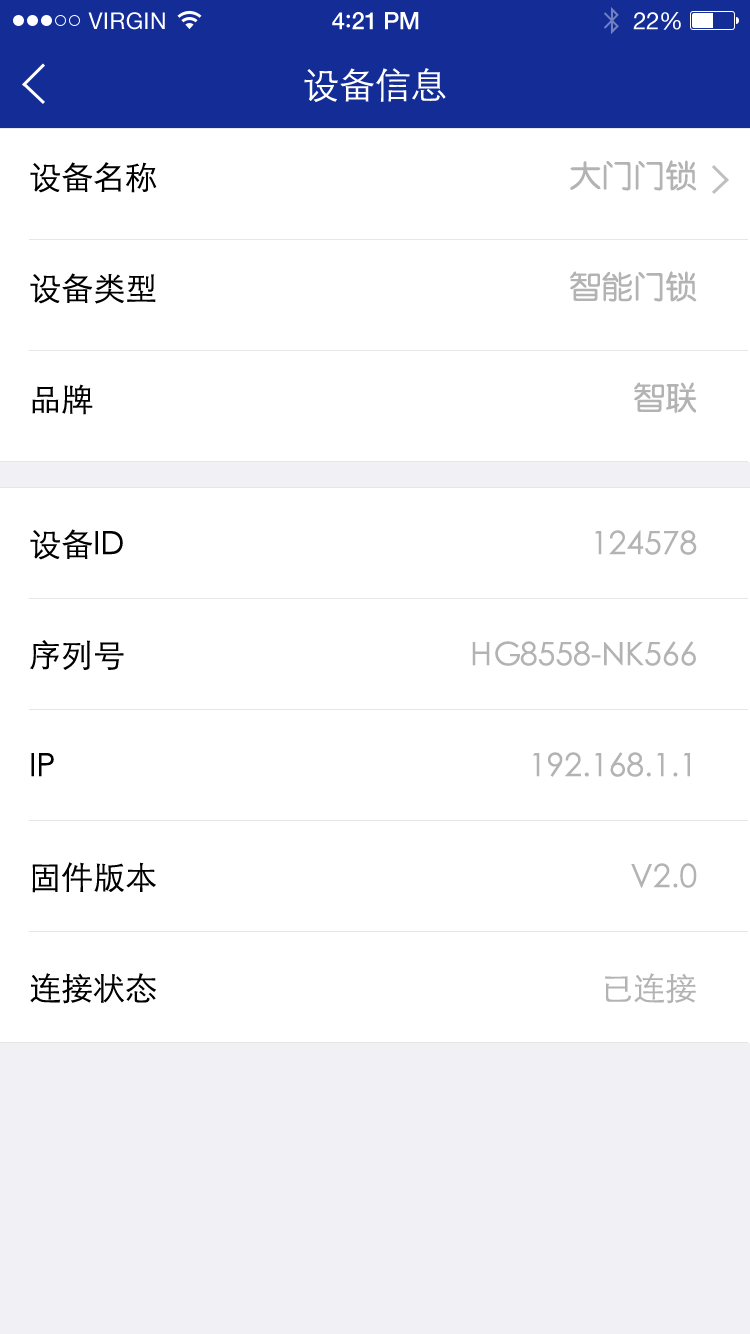
<style>
.page{position:relative;width:750px;height:1334px;background:#ffffff}
.page>*{position:absolute;margin:0}
.t1{font:36px "STXihei";color:#fefefe}
.t2{font:32px/111px "FZY3JW--GB1-0";color:#b3b3b3}
.t3{font:32px/111px "STXihei";color:#000000}
.t4{font:32px/111px "STXihei";color:#b3b3b3}
</style>
<div class="page">
<p class="t1" style="left:304px;top:68px;width:142px;height:34px">设备信息</p>
<p class="t2" style="left:570px;top:160px;width:127px;height:254px;text-align:right">大门门锁<br>智能门锁<br>智联</p>
<p class="t3" style="left:30px;top:162px;width:127px;height:253px">设备名称<br>设备类型<br>品牌</p>
<p class="t3" style="left:30px;top:529px;width:126px;height:475px">设备ID<br>序列号<br>IP<br>固件版本<br>连接状态</p>
<p class="t4" style="left:472px;top:530px;width:225px;height:474px;text-align:right">124578<br>HG8558-NK566<br>192.168.1.1<br>V2.0<br>已连接</p>
</div>
